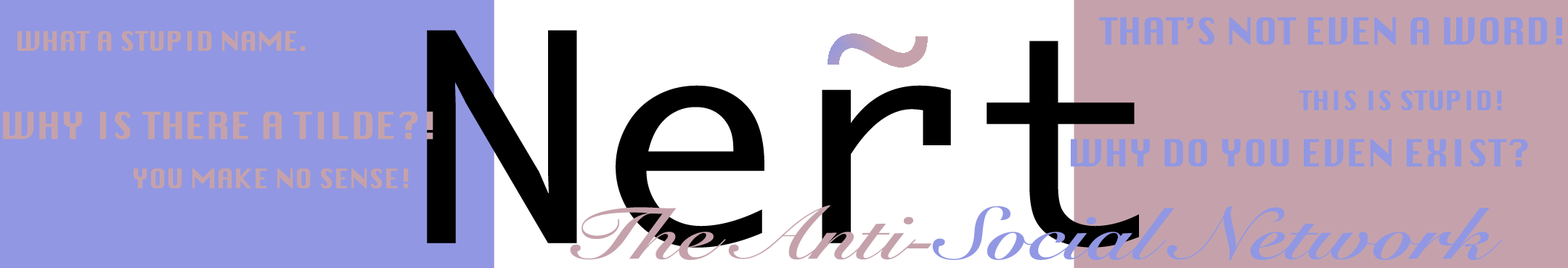
<style>
.page{position:relative;width:1568px;height:268px;background:#9197e2}
.page>*{position:absolute;margin:0}
.t1{font:36.3px "Silom";color:#9197e2}
.t2{font:26.1px "Silom";color:#c5a2ab}
.t3{font:26.1px "Silom";color:#9197e2}
.t4{font:36.3px "Silom";color:#c5a2ab}
</style>
<div class="page">
<p class="t1" style="left:1099px;top:17px;width:463px;height:28px">THAT’S NOT EVEN A WORD!</p>
<p class="t2" style="left:17px;top:30px;width:289px;height:21px">WHAT A STUPID NAME.</p>
<p class="t3" style="left:1299px;top:90px;width:203px;height:20px">THIS IS STUPID!</p>
<p class="t4" style="left:3px;top:111px;width:430px;height:28px">WHY IS THERE A TILDE?!</p>
<p class="t1" style="left:1071px;top:139px;width:457px;height:28px">WHY DO YOU EVEN EXIST?</p>
<p class="t2" style="left:134px;top:168px;width:275px;height:21px">YOU MAKE NO SENSE!</p>
</div>
